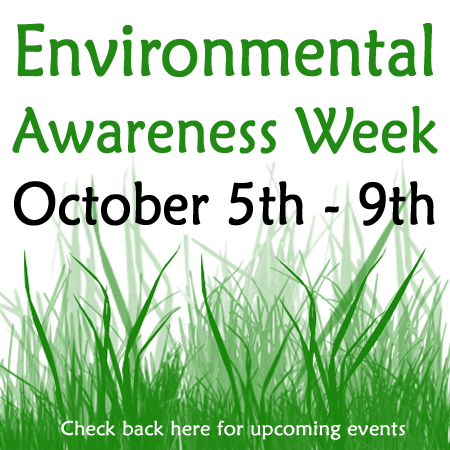
<style>
.page{position:relative;width:450px;height:450px;background:#ffffff}
.page>*{position:absolute;margin:0}
.t1{font:59.7px "MaiandraGD-Regular";color:#000000;font-weight:bold;scale:0.87 1}
.t2{font:72.5px "MaiandraGD-Regular";color:#228a14;font-weight:bold;scale:0.87 1}
.t3{font:64px "MaiandraGD-Regular";color:#228a14;font-weight:bold;scale:0.87 1}
.t4{font:20px "MaiandraGD-Regular";color:#ffffff;font-weight:bold}
</style>
<div class="page">
<p class="t1" style="left:12px;top:23px;width:426px;height:203px;text-align:center"><span class="t2">Environmental<br></span><span class="t3">Awareness Week<br></span>October 5th - 9th</p>
<p class="t4" style="left:61px;top:420px;width:344px;height:20px">Check back here for upcoming events</p>
</div>
